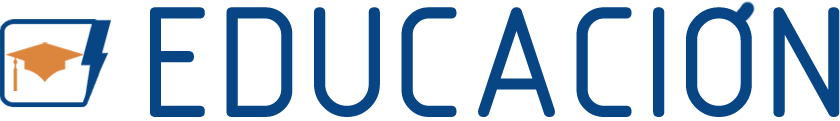
<style>
.page{position:relative;width:840px;height:121px;background:#ffffff}
.page>*{position:absolute;margin:0}
.t1{font:169.7px "ISOCPEUR";color:#074585}
</style>
<div class="page">
<p class="t1" style="left:150px;top:7px;width:690px;height:110px">EDUCACION</p>
</div>
